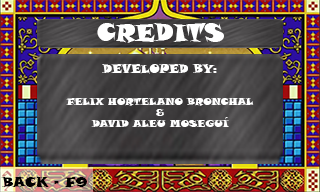
<style>
.page{position:relative;width:320px;height:192px}
.page>*{position:absolute;margin:0}
.t1{font:24px "SnapITC-Regular";color:#ffffff}
.t2{font:12px "SnapITC-Regular";color:#ffffff}
.t3{font:10px "SnapITC-Regular";color:#ffffff}
.t4{font:14px "SnapITC-Regular";color:#000000}
</style>
<div class="page">
<p class="t1" style="left:97px;top:23px;width:127px;height:20px">CREDITS</p>
<p class="t2" style="left:102px;top:64px;width:115px;height:10px">DEVELOPED BY:</p>
<p class="t3" style="left:66px;top:98px;width:188px;height:8px">FELIX HORTELANO BRONCHAL</p>
<p class="t3" style="left:156px;top:109px;width:8px;height:7px">&amp;</p>
<p class="t3" style="left:91px;top:117px;width:138px;height:10px">DAVID ALEU MOSEGUÍ</p>
<p class="t4" style="left:1px;top:177px;width:86px;height:10px">BACK - F9</p>
</div>
